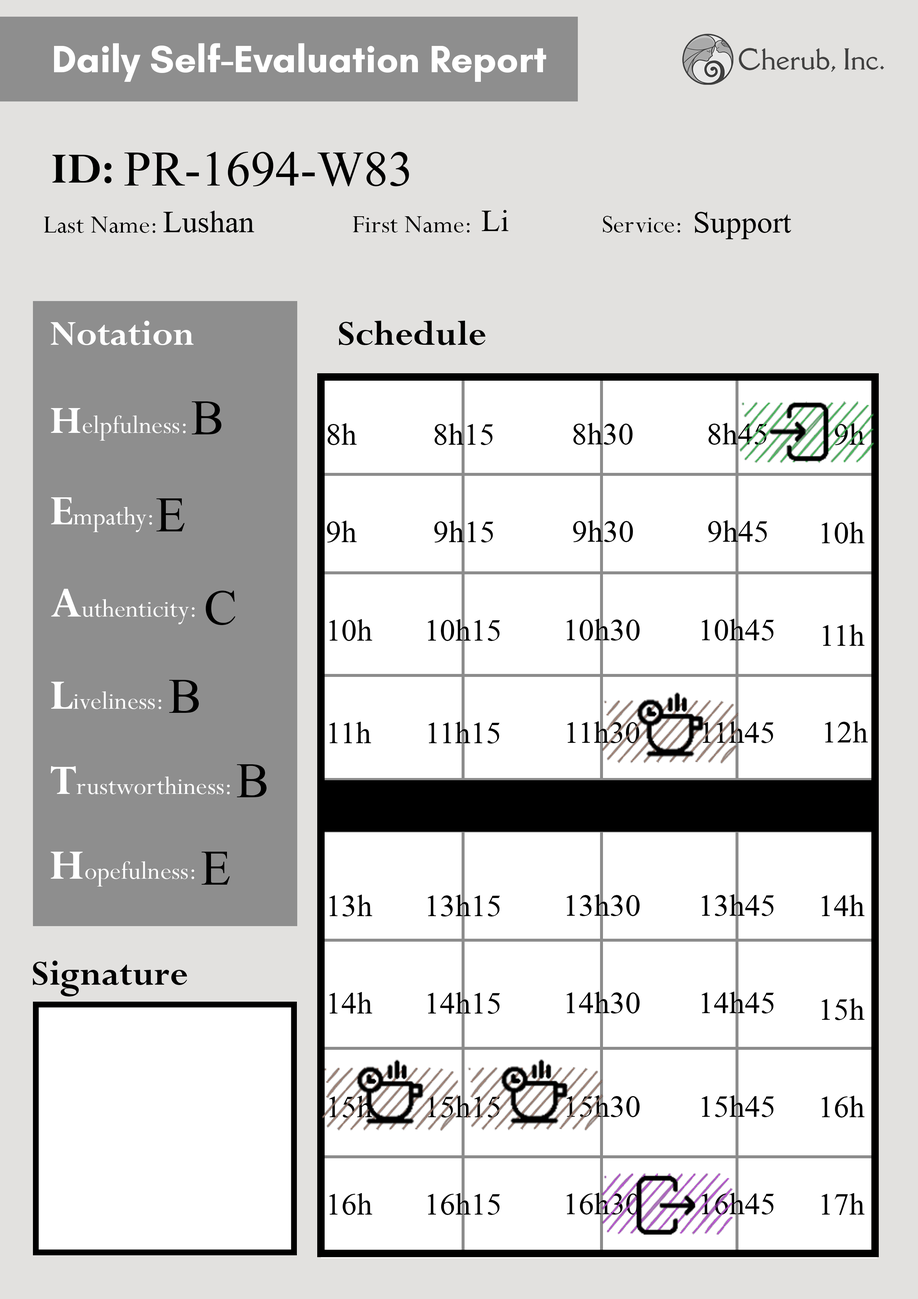
<style>
.page{position:relative;width:918px;height:1299px;background:#ffffff}
.page>*{position:absolute;margin:0}
.t1{font:74px "Microsoft-Himalaya";color:#000000}
.t2{font:46.3px "Microsoft-Himalaya";color:#000000}
</style>
<div class="page">
<p class="t1" style="left:124px;top:152px;width:285px;height:34px">PR-1694-W83</p>
<p class="t2" style="left:482px;top:210px;width:27px;height:21px">Li</p>
<p class="t2" style="left:163px;top:211px;width:91px;height:21px">Lushan</p>
<p class="t2" style="left:695px;top:212px;width:97px;height:27px">Support</p>
<p class="t1" style="left:192px;top:401px;width:30px;height:33px">B</p>
<p class="t2" style="left:328px;top:423px;width:29px;height:22px">8h</p>
<p class="t2" style="left:435px;top:423px;width:58px;height:22px">8h15</p>
<p class="t2" style="left:573px;top:423px;width:60px;height:22px">8h30</p>
<p class="t2" style="left:709px;top:423px;width:58px;height:22px">8h45</p>
<p class="t2" style="left:835px;top:423px;width:30px;height:22px">9h</p>
<p class="t1" style="left:156px;top:498px;width:29px;height:33px">E</p>
<p class="t2" style="left:327px;top:521px;width:30px;height:21px">9h</p>
<p class="t2" style="left:434px;top:521px;width:60px;height:21px">9h15</p>
<p class="t2" style="left:573px;top:520px;width:60px;height:22px">9h30</p>
<p class="t2" style="left:708px;top:520px;width:59px;height:22px">9h45</p>
<p class="t2" style="left:822px;top:522px;width:43px;height:21px">10h</p>
<p class="t1" style="left:205px;top:591px;width:30px;height:34px">C</p>
<p class="t2" style="left:329px;top:619px;width:43px;height:22px">10h</p>
<p class="t2" style="left:428px;top:619px;width:72px;height:22px">10h15</p>
<p class="t2" style="left:566px;top:619px;width:74px;height:21px">10h30</p>
<p class="t2" style="left:702px;top:619px;width:72px;height:21px">10h45</p>
<p class="t2" style="left:823px;top:624px;width:42px;height:22px">11h</p>
<p class="t1" style="left:169px;top:680px;width:30px;height:33px">B</p>
<p class="t2" style="left:329px;top:722px;width:42px;height:21px">11h</p>
<p class="t2" style="left:428px;top:722px;width:72px;height:21px">11h15</p>
<p class="t2" style="left:567px;top:721px;width:72px;height:22px">11h30</p>
<p class="t2" style="left:702px;top:721px;width:72px;height:22px">11h45</p>
<p class="t2" style="left:825px;top:721px;width:43px;height:21px">12h</p>
<p class="t1" style="left:237px;top:764px;width:30px;height:33px">B</p>
<p class="t1" style="left:201px;top:852px;width:29px;height:32px">E</p>
<p class="t2" style="left:329px;top:894px;width:43px;height:22px">13h</p>
<p class="t2" style="left:428px;top:894px;width:72px;height:22px">13h15</p>
<p class="t2" style="left:566px;top:894px;width:74px;height:22px">13h30</p>
<p class="t2" style="left:702px;top:894px;width:72px;height:22px">13h45</p>
<p class="t2" style="left:822px;top:894px;width:43px;height:22px">14h</p>
<p class="t2" style="left:329px;top:992px;width:43px;height:21px">14h</p>
<p class="t2" style="left:428px;top:992px;width:72px;height:22px">14h15</p>
<p class="t2" style="left:566px;top:991px;width:74px;height:22px">14h30</p>
<p class="t2" style="left:702px;top:991px;width:72px;height:22px">14h45</p>
<p class="t2" style="left:822px;top:998px;width:43px;height:22px">15h</p>
<p class="t2" style="left:329px;top:1095px;width:43px;height:22px">15h</p>
<p class="t2" style="left:428px;top:1095px;width:72px;height:22px">15h15</p>
<p class="t2" style="left:566px;top:1095px;width:74px;height:22px">15h30</p>
<p class="t2" style="left:702px;top:1095px;width:72px;height:22px">15h45</p>
<p class="t2" style="left:822px;top:1095px;width:43px;height:22px">16h</p>
<p class="t2" style="left:329px;top:1193px;width:43px;height:22px">16h</p>
<p class="t2" style="left:428px;top:1193px;width:72px;height:22px">16h15</p>
<p class="t2" style="left:566px;top:1192px;width:74px;height:22px">16h30</p>
<p class="t2" style="left:702px;top:1192px;width:72px;height:22px">16h45</p>
<p class="t2" style="left:822px;top:1193px;width:43px;height:22px">17h</p>
</div>
